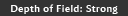
<style>
.page{position:relative;width:128px;height:16px;background:#333333}
.page>*{position:absolute;margin:0}
.t1{font:10px "AmiraParadiso";letter-spacing:0.05em;color:#ffffff}
</style>
<div class="page">
<p class="t1" style="left:11px;top:4px;width:107px;height:10px">Depth of Field: Strong</p>
</div>
